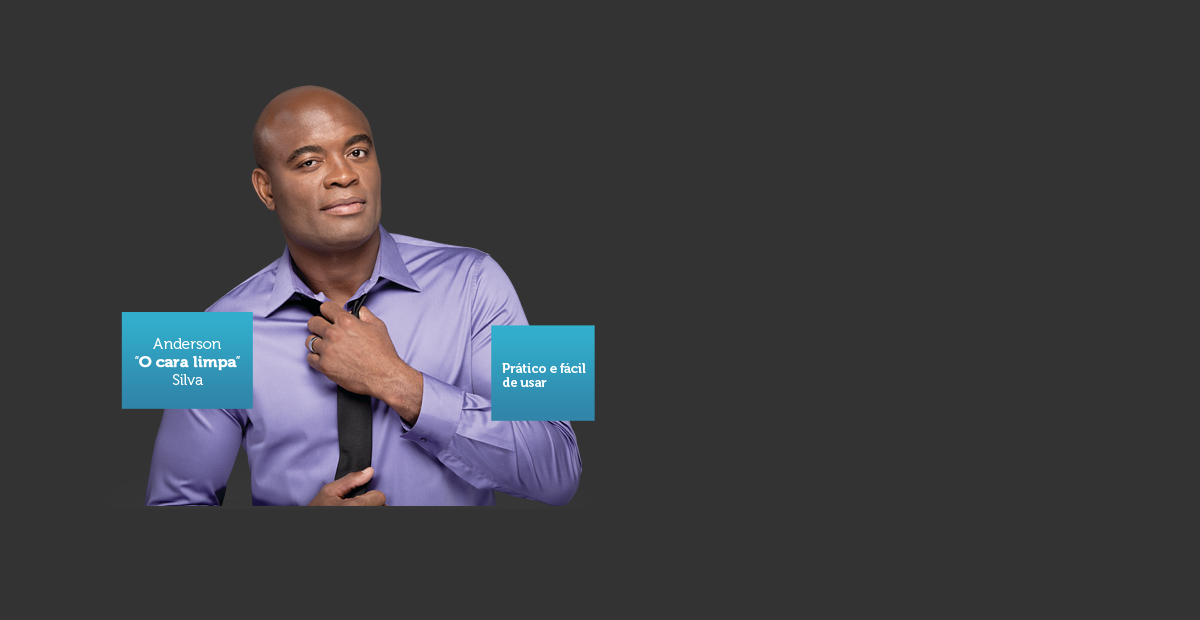
<style>
.page{position:relative;width:1200px;height:620px;background:#333333}
.page>*{position:absolute;margin:0}
.t1{font:15.2px/18.2px "Museo-700";color:#ffffff;font-weight:bold}
.t2{font:15.2px/18.2px "Museo-300";color:#ffffff}
.t3{font:13px/14px "Museo-700";letter-spacing:0.005em;color:#ffffff}
</style>
<div class="page">
<p class="t1" style="left:135px;top:338px;width:105px;height:47px;text-align:center"><span class="t2">Anderson<br>“</span>O cara limpa<span class="t2">”<br>Silva</span></p>
<p class="t3" style="left:502px;top:363px;width:84px;height:24px">Prático e fácil de usar</p>
</div>
